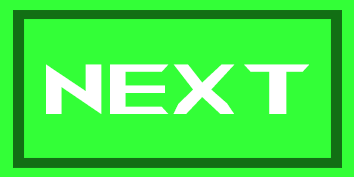
<style>
.page{position:relative;width:354px;height:177px;background:#33ff37}
.page>*{position:absolute;margin:0}
.t1{font:70.8px "AniMeMatrix-MB_EN";color:#ffffff;scale:1.05 1}
</style>
<div class="page">
<p class="t1" style="left:46px;top:64px;width:263px;height:50px">next</p>
</div>
